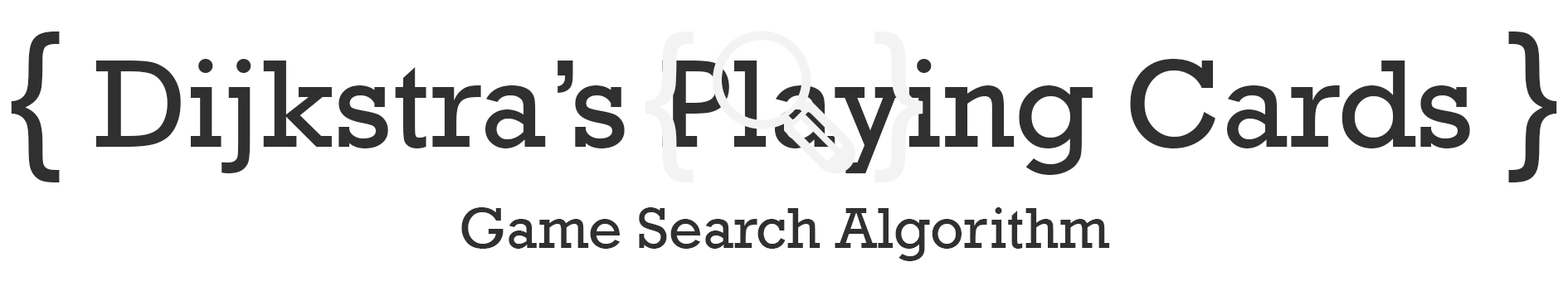
<style>
.page{position:relative;width:1568px;height:296px;background:#ffffff}
.page>*{position:absolute;margin:0}
.t1{font:126.6px/101.3px "Rockwell";color:#303030}
.t2{font:168.8px/101.3px "Rockwell";color:#303030}
.t3{font:59.1px/101.3px "Rockwell";color:#303030}
</style>
<div class="page">
<p class="t1" style="left:11px;top:32px;width:1546px;height:229px;text-align:center"><span class="t2">{</span> Dijkstra’s Playing Cards <span class="t2">}<br></span><span class="t3">Game Search Algorithm</span></p>
</div>
